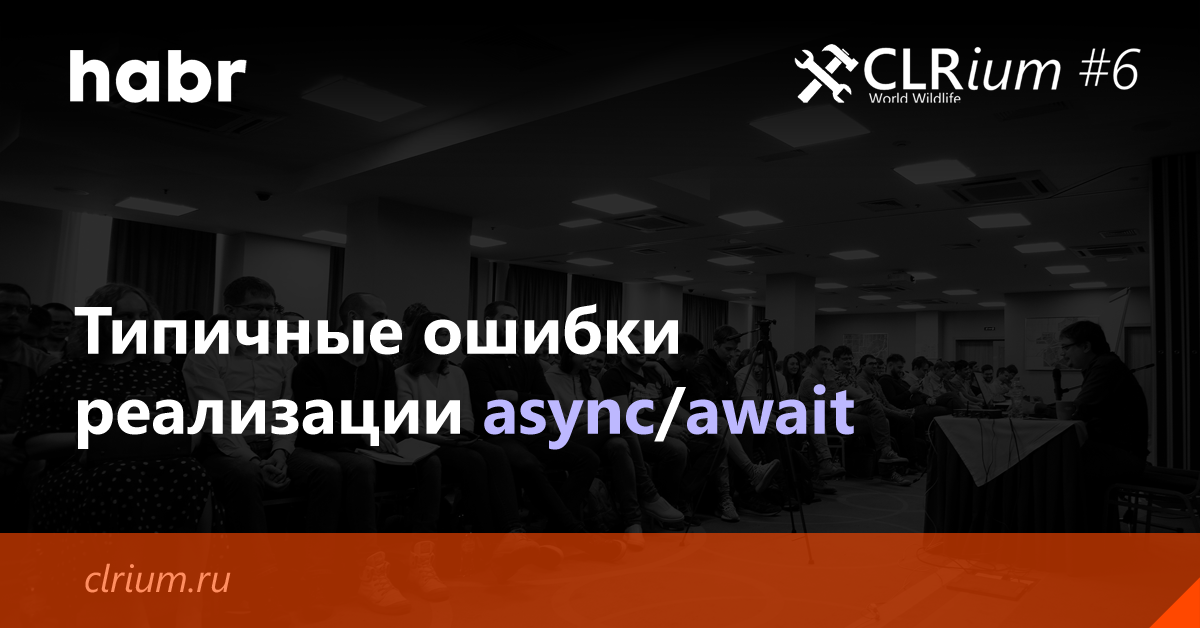
<style>
.page{position:relative;width:1200px;height:628px}
.page>*{position:absolute;margin:0}
.t1{font:66.7px "SegoeUI-Bold";color:#ffffff}
.t2{font:66.7px "SegoeUI-Bold";color:#bdb8ff}
.t3{font:38.3px "SegoeUI-Italic";color:#ff8e61}
</style>
<div class="page">
<p class="t1" style="left:74px;top:303px;width:780px;height:147px">Типичные ошибки реализации <span class="t2">async</span>/<span class="t2">await</span></p>
<p class="t3" style="left:85px;top:563px;width:146px;height:30px">clrium.ru</p>
</div>
